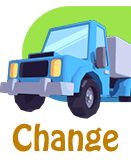
<style>
.page{position:relative;width:131px;height:165px;background:#ffffff}
.page>*{position:absolute;margin:0}
.t1{font:32px "HoboStd";color:#bf7e01}
</style>
<div class="page">
<p class="t1" style="left:12px;top:123px;width:106px;height:29px">Change</p>
</div>
